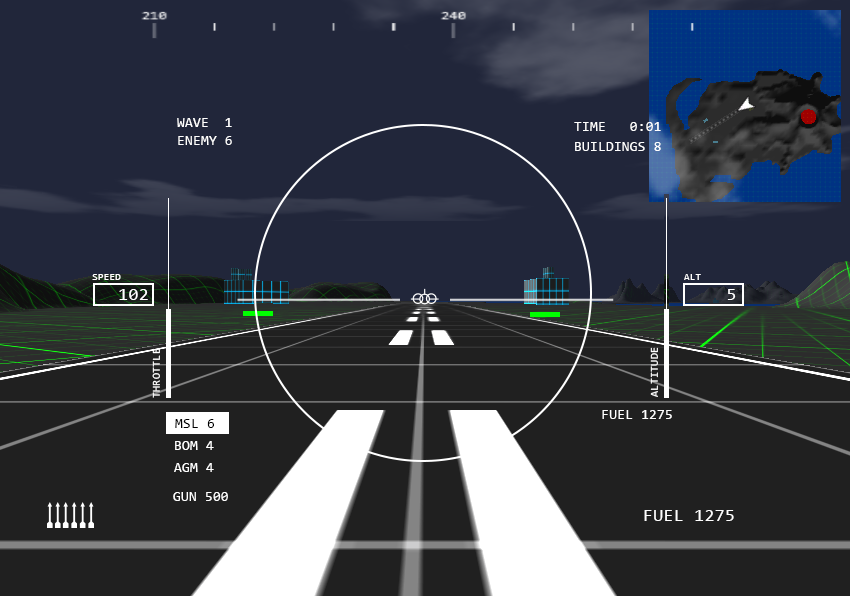
<style>
.page{position:relative;width:850px;height:596px;background:#21263a}
.page>*{position:absolute;margin:0}
.t1{font:14px "Consolas";letter-spacing:0.02em;color:#ffffff}
.t2{font:10px "Consolas";letter-spacing:0.02em;color:#ffffff}
.t3{font:18px "Consolas";letter-spacing:0.02em;color:#ffffff}
.t4{font:10.7px "Consolas";letter-spacing:0.02em;color:#ffffff}
.t5{font:14px "Consolas";letter-spacing:0.02em;color:#000000}
</style>
<div class="page">
<p class="t1" style="left:177px;top:118px;width:55px;height:9px">WAVE  1</p>
<p class="t1" style="left:574px;top:122px;width:87px;height:9px">TIME   0:01</p>
<p class="t1" style="left:178px;top:136px;width:54px;height:9px">ENEMY 6</p>
<p class="t1" style="left:575px;top:142px;width:86px;height:9px">BUILDINGS 8</p>
<p class="t2" style="left:92px;top:274px;width:29px;height:6px">SPEED</p>
<p class="t2" style="left:684px;top:274px;width:17px;height:6px">ALT</p>
<p class="t3" style="left:119px;top:289px;width:29px;height:11px">102</p>
<p class="t3" style="left:727px;top:289px;width:9px;height:11px">5</p>
<p class="t4" style="left:152px;top:348px;width:8px;height:50px;rotate:-90deg">THROTTLE</p>
<p class="t4" style="left:650px;top:347px;width:8px;height:50px;rotate:-90deg">ALTITUDE</p>
<p class="t1" style="left:602px;top:410px;width:70px;height:9px">FUEL 1275</p>
<p class="t5" style="left:175px;top:419px;width:39px;height:9px">MSL 6</p>
<p class="t1" style="left:175px;top:441px;width:39px;height:9px">BOM 4</p>
<p class="t1" style="left:174px;top:463px;width:40px;height:9px">AGM 4</p>
<p class="t1" style="left:173px;top:492px;width:55px;height:9px">GUN 500</p>
<p class="t3" style="left:644px;top:510px;width:90px;height:11px">FUEL 1275</p>
</div>
